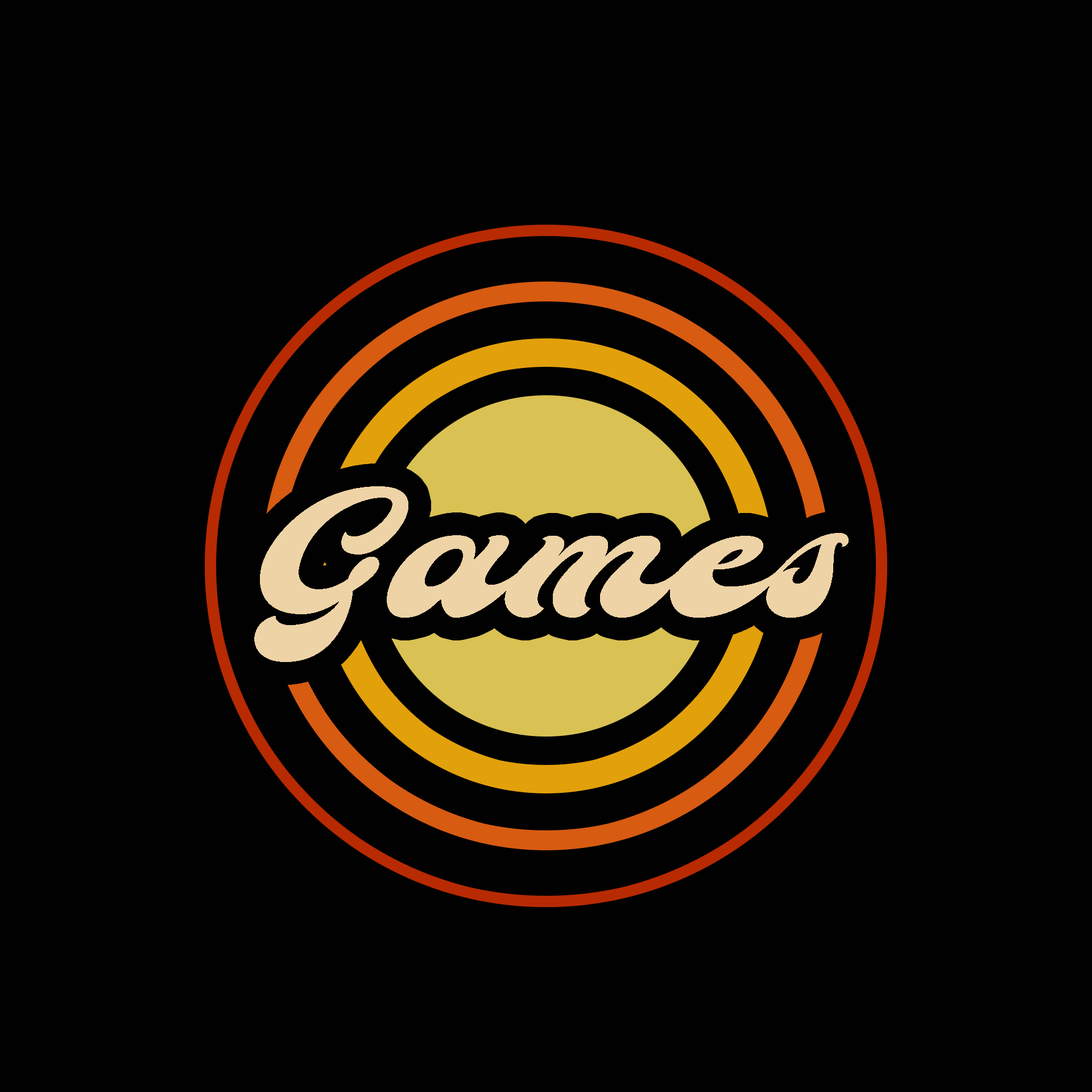
<style>
.page{position:relative;width:1092px;height:1092px;background:#010101}
.page>*{position:absolute;margin:0}
.t1{font:195.5px "BouldsterDEMO-Regular";color:#eed3a6;scale:1.27 1}
</style>
<div class="page">
<p class="t1" style="left:254px;top:486px;width:595px;height:176px">Games</p>
</div>
